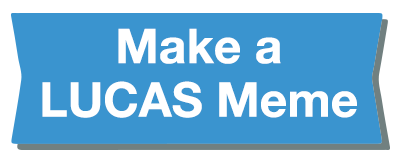
<style>
.page{position:relative;width:402px;height:165px;background:#3a94cf}
.page>*{position:absolute;margin:0}
.t1{font:48px/53.7px "HelveticaNeueLT-Bold";color:#ffffff}
</style>
<div class="page">
<p class="t1" style="left:42px;top:28px;width:315px;height:90px;text-align:center">Make a<br>LUCAS Meme</p>
</div>
